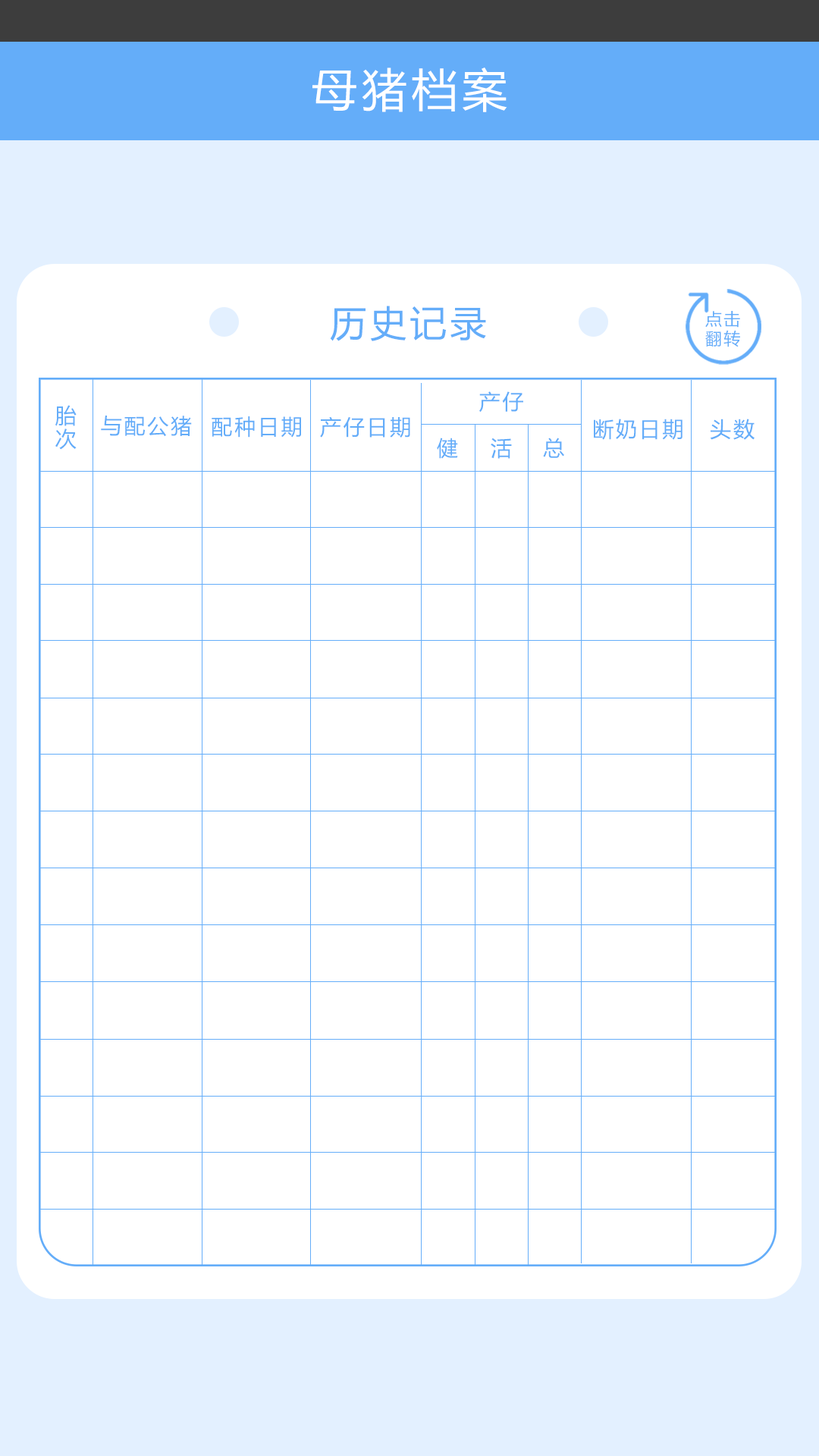
<style>
.page{position:relative;width:819px;height:1456px;background:#ffffff}
.page>*{position:absolute;margin:0}
.t1{font:45.5px "MicrosoftYaHei";letter-spacing:0.1em;color:#ffffff}
.t2{font:36.4px "MicrosoftYaHei";letter-spacing:0.1em;color:#64adf9}
.t3{font:16.7px "MicrosoftYaHei";letter-spacing:0.1em;color:#64adf9}
.t4{font:21.2px "MicrosoftYaHei";letter-spacing:0.1em;color:#64adf9}
.t5{font:21.2px/15.2px "MicrosoftYaHei";letter-spacing:0.1em;color:#64adf9}
</style>
<div class="page">
<p class="t1" style="left:312px;top:67px;width:195px;height:45px">母猪档案</p>
<p class="t2" style="left:330px;top:306px;width:156px;height:35px">历史记录</p>
<p class="t3" style="left:705px;top:311px;width:35px;height:17px">点击</p>
<p class="t3" style="left:705px;top:330px;width:35px;height:17px">翻转</p>
<p class="t4" style="left:479px;top:391px;width:44px;height:22px">产仔</p>
<p class="t5" style="left:55px;top:405px;width:22px;height:45px">胎次</p>
<p class="t4" style="left:101px;top:416px;width:91px;height:21px">与配公猪</p>
<p class="t4" style="left:212px;top:416px;width:89px;height:22px">配种日期</p>
<p class="t4" style="left:320px;top:416px;width:90px;height:22px">产仔日期</p>
<p class="t4" style="left:594px;top:419px;width:88px;height:21px">断奶日期</p>
<p class="t4" style="left:710px;top:419px;width:45px;height:21px">头数</p>
<p class="t4" style="left:437px;top:438px;width:21px;height:21px">健</p>
<p class="t4" style="left:491px;top:438px;width:21px;height:21px">活</p>
<p class="t4" style="left:543px;top:438px;width:21px;height:20px">总</p>
</div>
